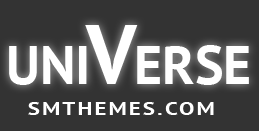
<style>
.page{position:relative;width:259px;height:131px;background:#333333}
.page>*{position:absolute;margin:0}
.t1{font:54.2px "PTSans-Bold";color:#ffffff;text-transform:uppercase}
.t2{font:84.4px "PTSans-Bold";color:#ffffff;text-transform:uppercase}
.t3{font:18.1px "PTSans-Bold";letter-spacing:0.1em;color:#ffffff;text-transform:uppercase;scale:1.25 1}
</style>
<div class="page">
<p class="t1" style="left:9px;top:25px;width:240px;height:60px">uni<span class="t2">V</span>erse</p>
<p class="t3" style="left:28px;top:102px;width:186px;height:13px">smthemes.com</p>
</div>
